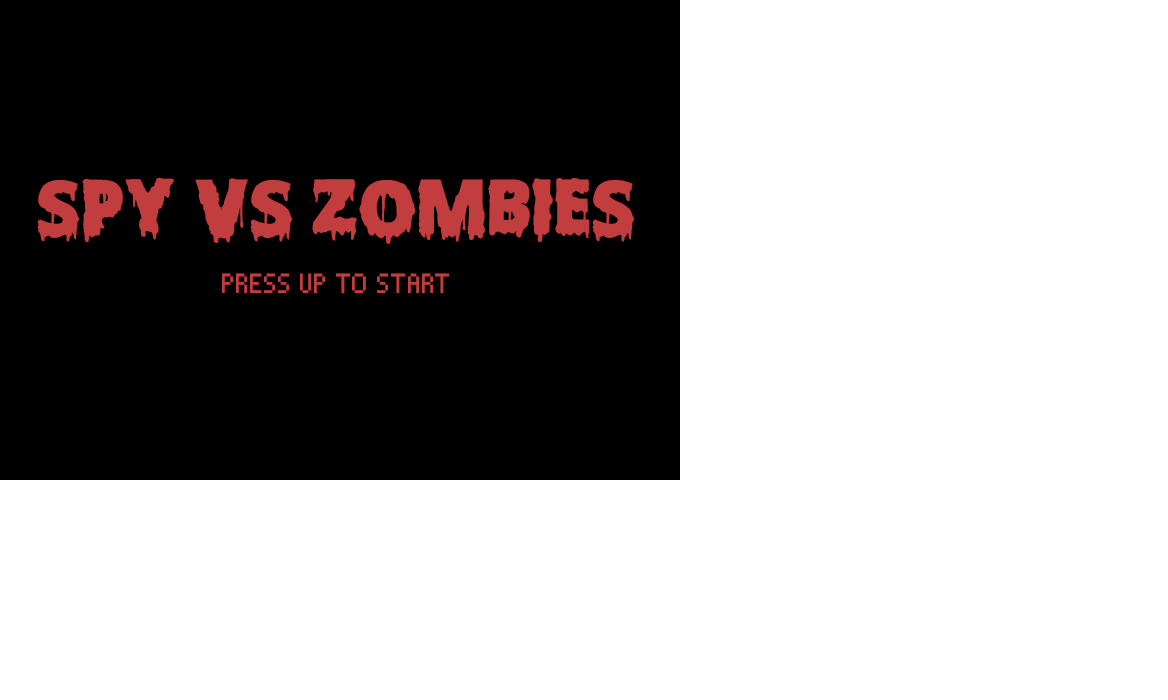
<style>
.page{position:relative;width:1168px;height:700px;background:#ffffff}
.page>*{position:absolute;margin:0}
.t1{font:72px "ScaryHalloweenFont-Bold";color:#c23d3d;text-transform:uppercase}
.t2{font:36px "Pixelade";color:#c23d3d;text-transform:uppercase}
</style>
<div class="page">
<p class="t1" style="left:37px;top:177px;width:597px;height:67px">spy vs zombies</p>
<p class="t2" style="left:222px;top:273px;width:227px;height:20px">press up to start</p>
</div>
